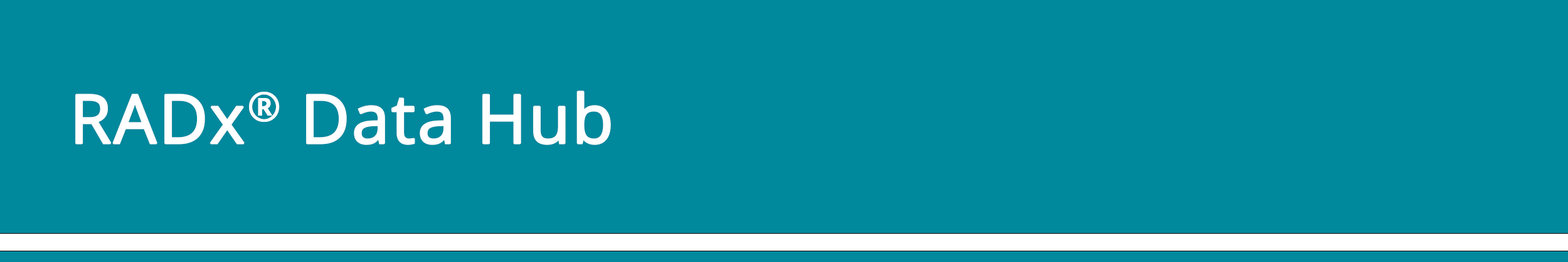
<style>
.page{position:relative;width:1568px;height:262px;background:#00889d}
.page>*{position:absolute;margin:0}
.t1{font:67.9px "OpenSans";color:#ffffff;font-weight:bold}
</style>
<div class="page">
<p class="t1" style="left:75px;top:90px;width:536px;height:55px">RADx® Data Hub</p>
</div>
